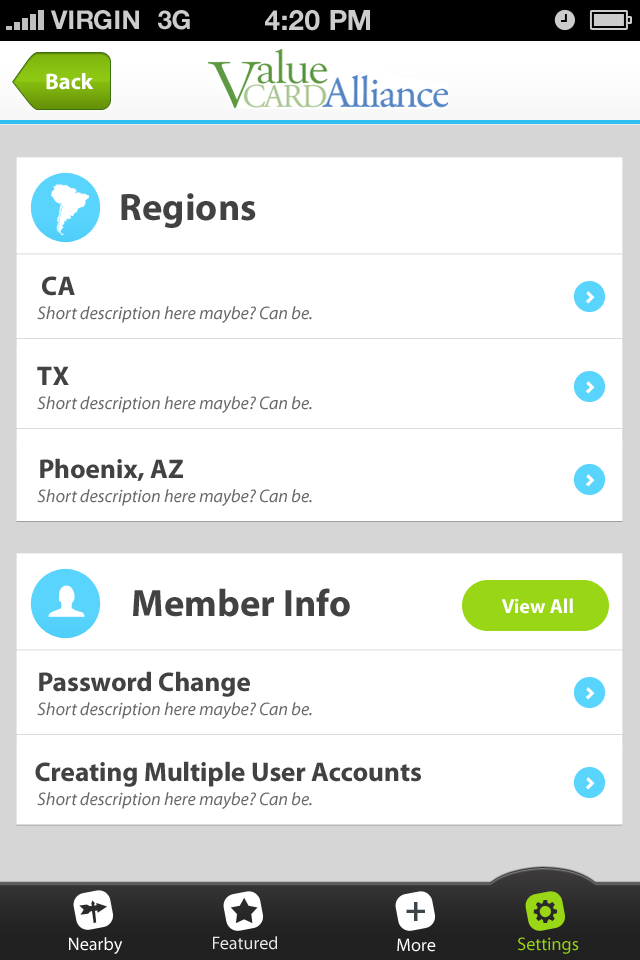
<style>
.page{position:relative;width:640px;height:960px;background:#ffffff}
.page>*{position:absolute;margin:0}
.t1{font:26px "HelveticaNeue-Bold";color:#cccccc;text-transform:uppercase}
.t2{font:28px "HelveticaNeue-Bold";color:#cccccc;text-transform:uppercase}
.t3{font:22.6px "MyriadPro-Bold";color:#ffffff}
.t4{font:38.4px "MyriadPro-Bold";color:#424242}
.t5{font:27.2px "MyriadPro-Bold";color:#424242}
.t6{font:18.1px "MyriadPro-It";color:#686868}
.t7{font:20.4px "MyriadPro-Bold";color:#ffffff}
.t8{font:36px "MyriadPro-Bold";color:#3d4548}
.t9{font:18.1px "MyriadPro-Regular";color:#ffffff}
.t10{font:18.1px "MyriadPro-Regular";color:#e9e9e9}
.t11{font:18.1px "MyriadPro-Regular";color:#99d615}
</style>
<div class="page">
<p class="t1" style="left:50px;top:10px;width:89px;height:20px">VIRGIN</p>
<p class="t1" style="left:158px;top:10px;width:32px;height:20px">3G</p>
<p class="t2" style="left:265px;top:10px;width:105px;height:21px">4:20 pM</p>
<p class="t3" style="left:46px;top:73px;width:48px;height:17px">Back</p>
<p class="t4" style="left:121px;top:193px;width:135px;height:35px">Regions</p>
<p class="t5" style="left:42px;top:276px;width:33px;height:20px">CA</p>
<p class="t6" style="left:37px;top:306px;width:275px;height:17px">Short description here maybe? Can be.</p>
<p class="t5" style="left:37px;top:366px;width:32px;height:19px">TX</p>
<p class="t6" style="left:37px;top:396px;width:275px;height:17px">Short description here maybe? Can be.</p>
<p class="t5" style="left:40px;top:458px;width:143px;height:23px">Phoenix, AZ</p>
<p class="t6" style="left:37px;top:489px;width:275px;height:17px">Short description here maybe? Can be.</p>
<p class="t4" style="left:133px;top:588px;width:217px;height:29px">Member Info</p>
<p class="t7" style="left:501px;top:598px;width:72px;height:16px">View All</p>
<p class="t5" style="left:39px;top:671px;width:211px;height:26px">Password Change</p>
<p class="t6" style="left:37px;top:702px;width:275px;height:17px">Short description here maybe? Can be.</p>
<p class="t5" style="left:35px;top:761px;width:386px;height:26px">Creating Multiple User Accounts</p>
<p class="t6" style="left:37px;top:792px;width:275px;height:17px">Short description here maybe? Can be.</p>
<p class="t8" style="left:406px;top:902px;width:19px;height:19px">+</p>
<p class="t9" style="left:69px;top:937px;width:54px;height:17px">Nearby</p>
<p class="t10" style="left:213px;top:936px;width:64px;height:14px">Featured</p>
<p class="t9" style="left:397px;top:938px;width:39px;height:14px">More</p>
<p class="t11" style="left:518px;top:937px;width:61px;height:17px">Settings</p>
</div>
